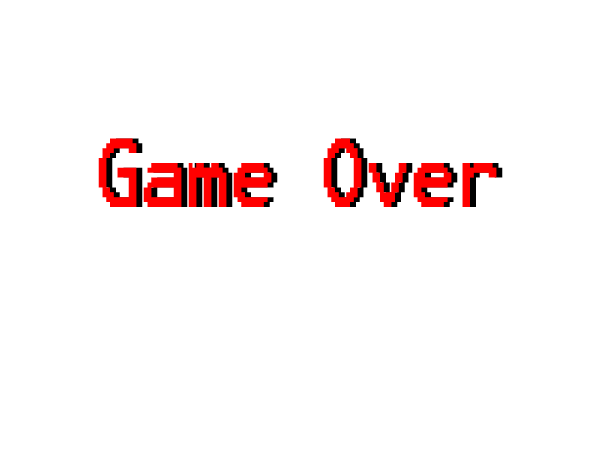
<style>
.page{position:relative;width:600px;height:450px;background:#ffffff}
.page>*{position:absolute;margin:0}
.t1{font:78.4px "Terminal";color:#ff0000;scale:0.77 1}
.t2{font:78.4px "Terminal";scale:0.77 1}
</style>
<div class="page">
<p class="t1" style="left:98px;top:138px;width:399px;height:69px">Game Over</p>
<p class="t2" style="left:104px;top:138px;width:399px;height:69px">Game Over</p>
</div>
